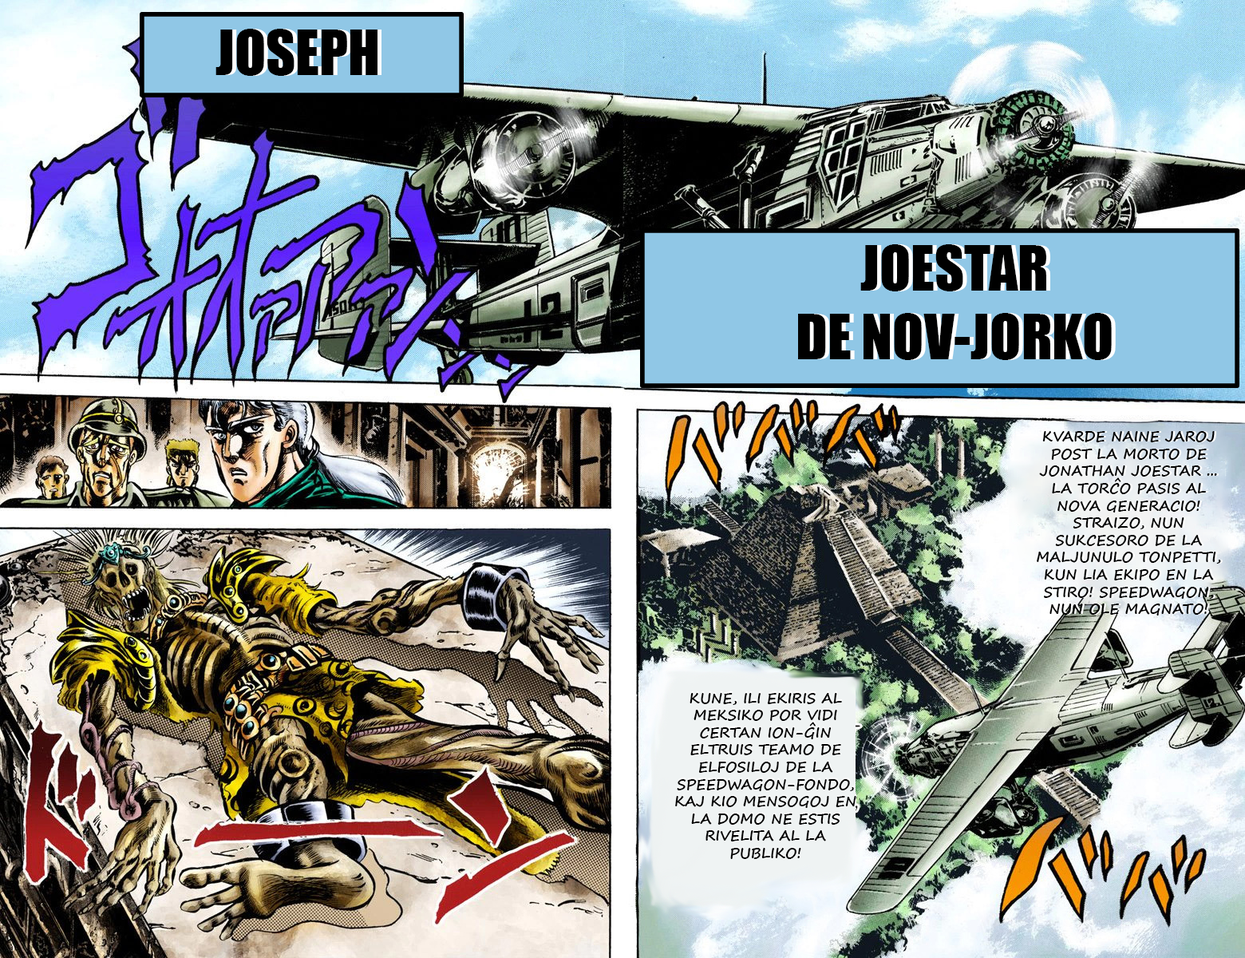
<style>
.page{position:relative;width:1245px;height:958px}
.page>*{position:absolute;margin:0}
.t1{font:57.5px "Impact";color:#000000}
.t2{font:14.4px "SegoePrint-Bold";color:#000000}
.t3{font:14.4px "SegoePrint-Bold"}
</style>
<div class="page">
<p class="t1" style="left:215px;top:29px;width:163px;height:47px">JOSEPH</p>
<p class="t1" style="left:798px;top:244px;width:314px;height:116px;text-align:center">JOESTAR <br>DE NOV-JORKO</p>
<p class="t1" style="left:802px;top:244px;width:314px;height:116px;text-align:center">JOESTAR <br>DE NOV-JORKO</p>
<p class="t2" style="left:1037px;top:431px;width:184px;height:184px;text-align:center">KVARDE NAINE JAROJ POST LA MORTO DE JONATHAN JOESTAR ... LA TORĈO PASIS AL NOVA GENERACIO! STRAIZO, NUN SUKCESORO DE LA MALJUNULO TONPETTI, KUN LIA EKIPO EN LA STIRO! SPEEDWAGON, NUN OLE MAGNATO!</p>
<p class="t3" style="left:675px;top:691px;width:182px;height:167px;text-align:center">KUNE, ILI EKIRIS AL MEKSIKO POR VIDI CERTAN ION-ĜIN ELTRUIS TEAMO DE ELFOSILOJ DE LA SPEEDWAGON-FONDO, KAJ KIO MENSOGOJ EN LA DOMO NE ESTIS RIVELITA AL LA PUBLIKO!</p>
<p class="t2" style="left:675px;top:693px;width:181px;height:166px;text-align:center">KUNE, ILI EKIRIS AL MEKSIKO POR VIDI CERTAN ION-ĜIN ELTRUIS TEAMO DE ELFOSILOJ DE LA SPEEDWAGON-FONDO, KAJ KIO MENSOGOJ EN LA DOMO NE ESTIS RIVELITA AL LA PUBLIKO!</p>
</div>
